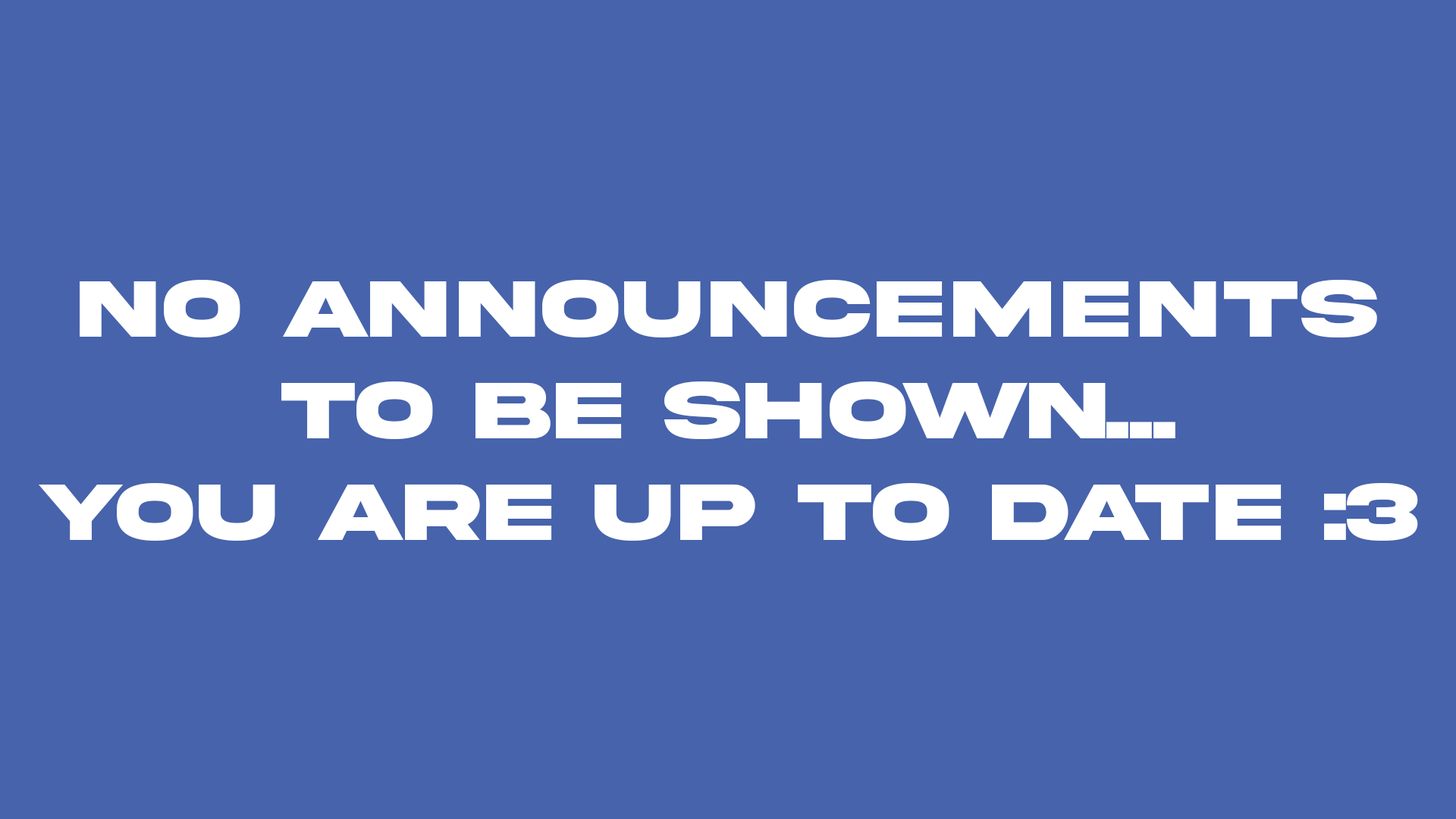
<style>
.page{position:relative;width:1456px;height:819px;background:#4663ac}
.page>*{position:absolute;margin:0}
.t1{font:84.8px "AkiraExpanded-SuperBold";color:#ffffff}
</style>
<div class="page">
<p class="t1" style="left:39px;top:280px;width:1379px;height:261px;text-align:center">No announcements<br>to be shown...<br>You are up to date :3</p>
</div>
